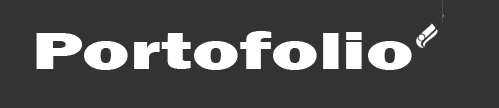
<style>
.page{position:relative;width:499px;height:108px;background:#333333}
.page>*{position:absolute;margin:0}
.t1{font:53.6px "FranklinGothic-Heavy";color:#ffffff;scale:1.49 1}
</style>
<div class="page">
<p class="t1" style="left:36px;top:31px;width:376px;height:39px">Portofolio</p>
</div>
